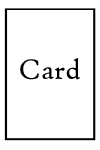
<style>
.page{position:relative;width:100px;height:150px;background:#ffffff}
.page>*{position:absolute;margin:0}
.t1{font:30px "HighTowerText-Reg";color:#000000}
</style>
<div class="page">
<p class="t1" style="left:20px;top:58px;width:60px;height:22px">Card</p>
</div>
